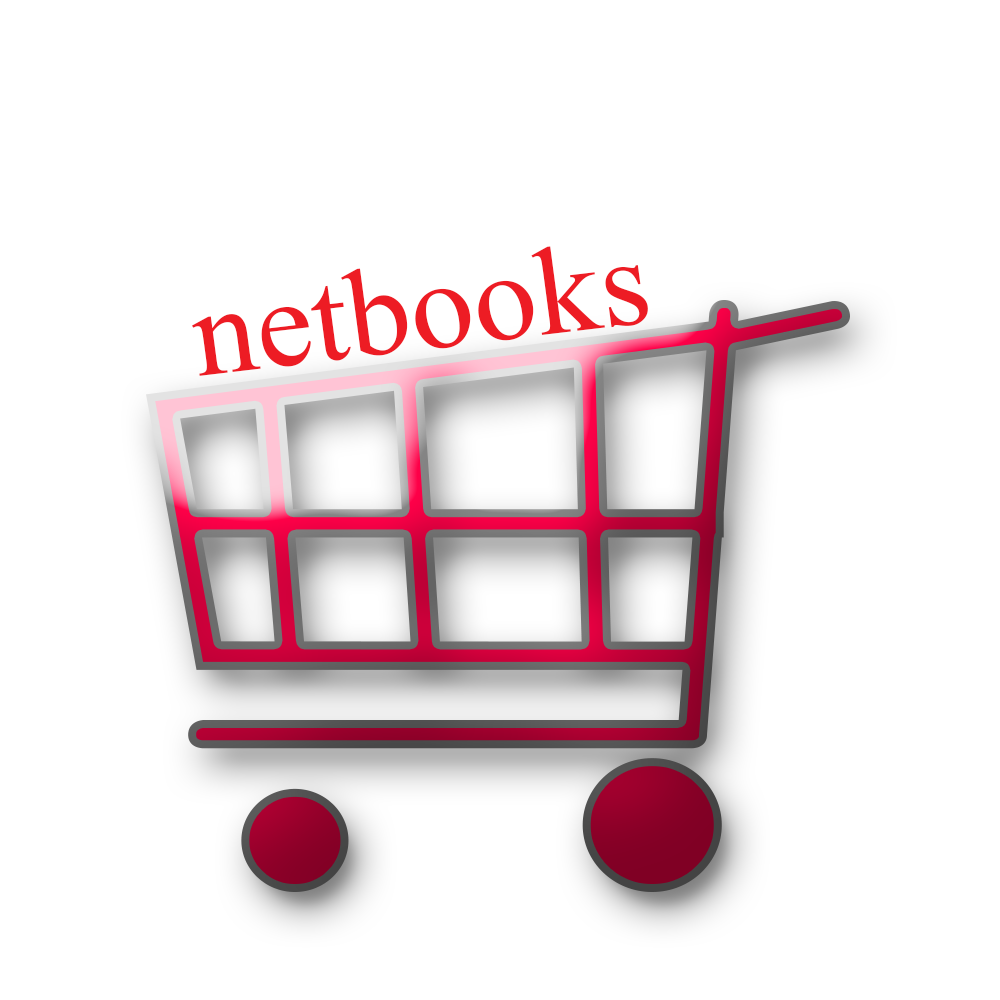
<style>
.page{position:relative;width:1000px;height:1000px;background:#ffffff}
.page>*{position:absolute;margin:0}
.t1{font:125px "TimesNewRomanPSMT";color:#ed1c24}
</style>
<div class="page">
<p class="t1" style="left:192px;top:246px;width:456px;height:130px;rotate:-7deg">netbooks</p>
</div>
